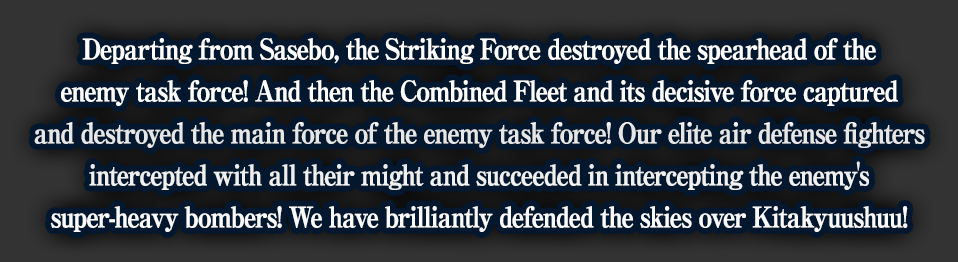
<style>
.page{position:relative;width:958px;height:262px;background:#03172f}
.page>*{position:absolute;margin:0}
.t1{font:28px/42px "RyuminPro-ExBold";letter-spacing:-0.08em;color:#ffffff;font-weight:bold;scale:0.9 1}
</style>
<div class="page">
<p class="t1" style="left:34px;top:38px;width:891px;height:194px;text-align:center">Departing from Sasebo, the Striking Force destroyed the spearhead of the<br>enemy task force! And then the Combined Fleet and its decisive force captured<br>and destroyed the main force of the enemy task force! Our elite air defense fighters<br>intercepted with all their might and succeeded in intercepting the enemy's<br>super-heavy bombers! We have brilliantly defended the skies over Kitakyuushuu!</p>
</div>
